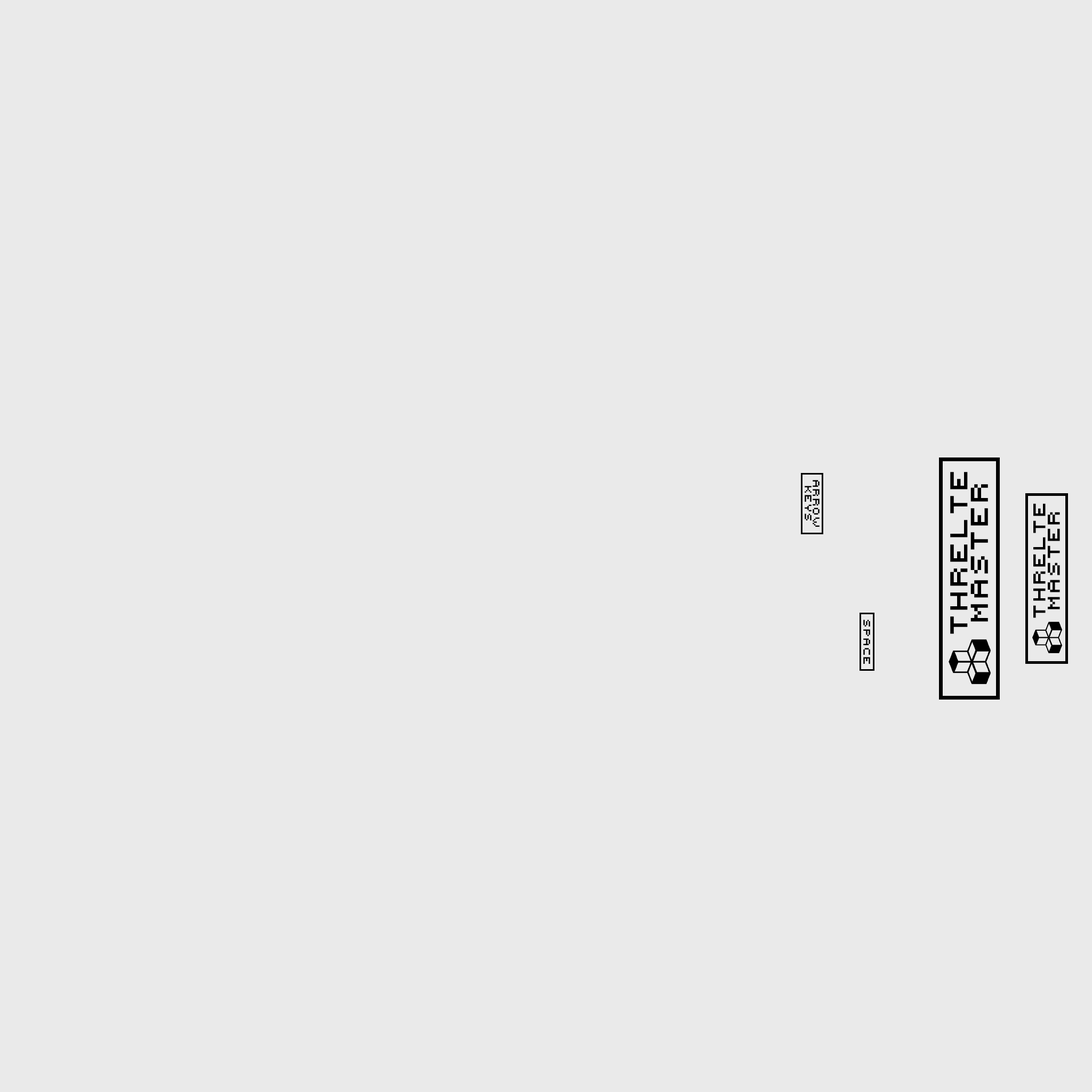
<style>
.page{position:relative;width:1092px;height:1092px;background:#eaeaea}
.page>*{position:absolute;margin:0}
.t1{font:17.1px "Beef'd";color:#000000}
.t2{font:6.7px "Beef'd";color:#000000}
.t3{font:12px "Beef'd";color:#000000}
</style>
<div class="page">
<p class="t1" style="left:950px;top:472px;width:38px;height:162px;rotate:-90deg">THRELTE MASTER</p>
<p class="t2" style="left:805px;top:480px;width:15px;height:47px;rotate:90deg">Arrow Keys</p>
<p class="t3" style="left:1033px;top:503px;width:27px;height:115px;rotate:-90deg">THRELTE MASTER</p>
<p class="t2" style="left:863px;top:620px;width:7px;height:44px;rotate:90deg">SPACE</p>
</div>
